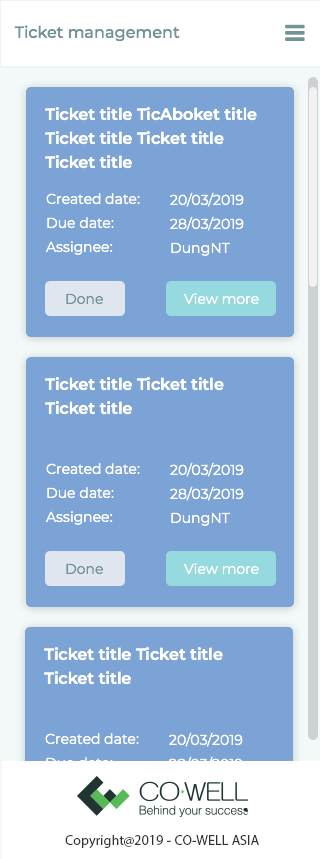
<style>
.page{position:relative;width:320px;height:859px;background:#7ba3d5}
.page>*{position:absolute;margin:0}
.t1{font:16px "Montserrat-Medium";color:#739497}
.t2{font:16px/24px "Montserrat-SemiBold";color:#ffffff}
.t3{font:14px/24px "Montserrat-Regular";color:#ffffff}
.t4{font:14px "Montserrat-Regular";color:#739497}
.t5{font:14px "Montserrat-Regular";color:#ffffff}
.t6{font:14px "MyriadPro-Regular";color:#333333}
</style>
<div class="page">
<p class="t1" style="left:14px;top:25px;width:166px;height:17px">Ticket management</p>
<p class="t2" style="left:45px;top:107px;width:212px;height:62px">Ticket title TicAboket title Ticket title Ticket title Ticket title</p>
<p class="t3" style="left:45px;top:193px;width:95px;height:62px">Created date:<br>Due date:<br>Assignee:</p>
<p class="t3" style="left:170px;top:192px;width:74px;height:64px">20/03/2019<br>28/03/2019<br>DungNT</p>
<p class="t4" style="left:66px;top:293px;width:37px;height:12px">Done</p>
<p class="t5" style="left:184px;top:293px;width:75px;height:12px">View more</p>
<p class="t2" style="left:45px;top:377px;width:179px;height:38px">Ticket title Ticket title Ticket title</p>
<p class="t3" style="left:170px;top:462px;width:74px;height:64px">20/03/2019<br>28/03/2019<br>DungNT</p>
<p class="t3" style="left:45px;top:463px;width:95px;height:62px">Created date:<br>Due date:<br>Assignee:</p>
<p class="t4" style="left:66px;top:563px;width:37px;height:12px">Done</p>
<p class="t5" style="left:184px;top:563px;width:75px;height:12px">View more</p>
<p class="t2" style="left:44px;top:647px;width:179px;height:38px">Ticket title Ticket title Ticket title</p>
<p class="t6" style="left:65px;top:835px;width:194px;height:13px">Copyright@2019 - CO-WELL ASIA</p>
</div>
